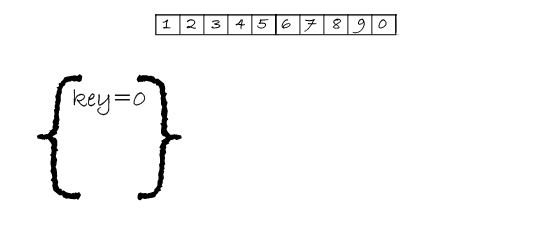
<style>
.page{position:relative;width:550px;height:250px;background:#ffffff}
.page>*{position:absolute;margin:0}
.t1{font:16.7px "BradleyHandITC";color:#000000}
.t2{font:16.7px "BradleyHandITC"}
.t3{font:166.7px "BradleyHandITC";color:#000000}
.t4{font:25px "BradleyHandITC";color:#000000}
</style>
<div class="page">
<p class="t1" style="left:162px;top:19px;width:9px;height:10px">1</p>
<p class="t1" style="left:186px;top:19px;width:10px;height:10px">2</p>
<p class="t1" style="left:211px;top:20px;width:10px;height:9px">3</p>
<p class="t1" style="left:235px;top:19px;width:10px;height:11px">4</p>
<p class="t1" style="left:257px;top:19px;width:12px;height:10px">5</p>
<p class="t1" style="left:281px;top:19px;width:10px;height:10px">6</p>
<p class="t1" style="left:304px;top:19px;width:13px;height:13px">7</p>
<p class="t1" style="left:333px;top:18px;width:8px;height:11px">8</p>
<p class="t1" style="left:352px;top:18px;width:13px;height:16px">9</p>
<p class="t2" style="left:378px;top:19px;width:9px;height:10px">0</p>
<p class="t3" style="left:37px;top:74px;width:145px;height:127px">{ }</p>
<p class="t4" style="left:73px;top:89px;width:73px;height:27px">key=0</p>
</div>
